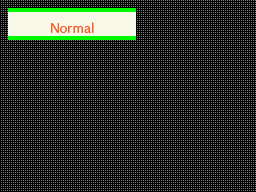
<style>
.page{position:relative;width:256px;height:192px;background:#000000}
.page>*{position:absolute;margin:0}
.t1{font:11.4px "HummingStd-D";letter-spacing:0.025em;color:#f85828}
.t2{font:11.4px "HummingStd-D";color:#f85828}
</style>
<div class="page">
<p class="t1" style="left:51px;top:22px;width:43px;height:11px"><span class="t2">No</span>rmal</p>
</div>
